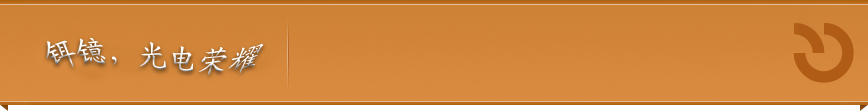
<style>
.page{position:relative;width:868px;height:111px}
.page>*{position:absolute;margin:0}
.t1{font:30px "KaiTi_GB2312";letter-spacing:0.025em;color:#ffffff}
</style>
<div class="page">
<p class="t1" style="left:46px;top:37px;width:218px;height:38px">铒镱，光电荣耀</p>
</div>
